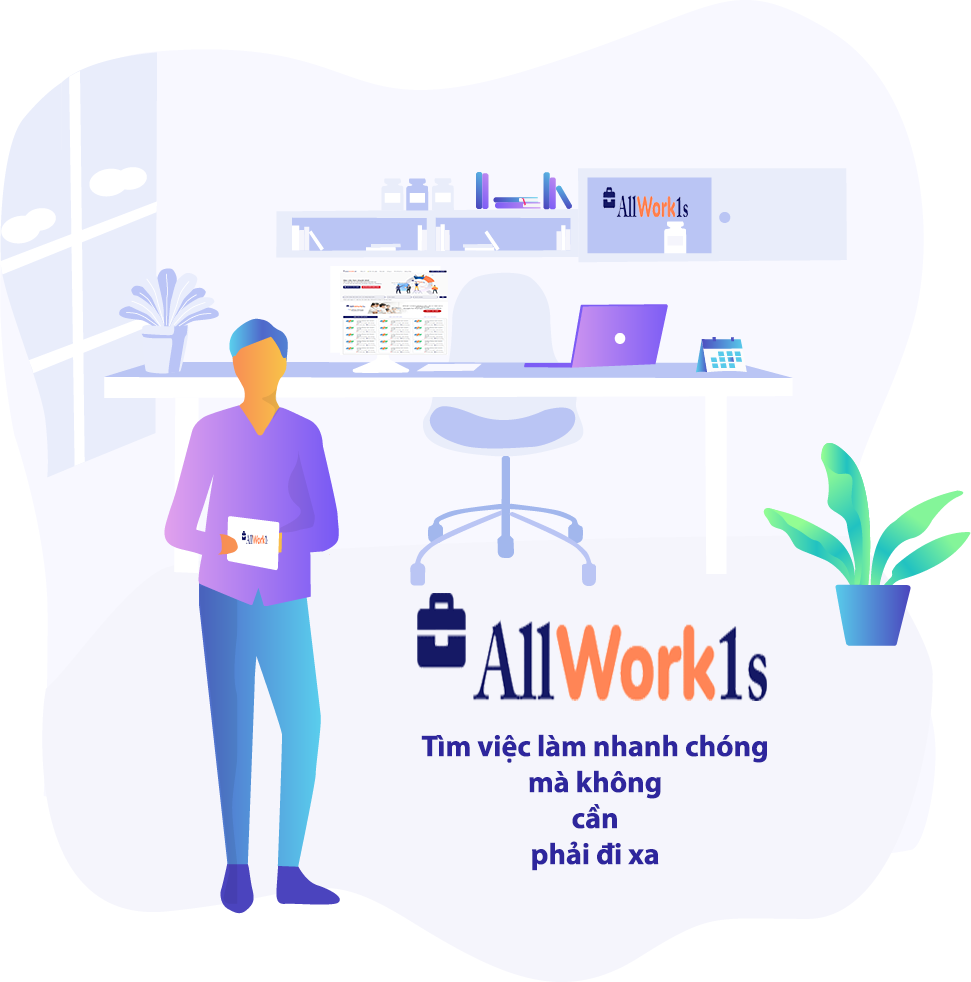
<style>
.page{position:relative;width:971px;height:982px;background:#f8f8ff}
.page>*{position:absolute;margin:0}
.t1{font:30px "MyriadPro-Bold";color:#2e269d}
</style>
<div class="page">
<p class="t1" style="left:421px;top:734px;width:346px;height:137px;text-align:center">Tìm việc làm nhanh chóng<br>mà không<br>cần<br>phải đi xa</p>
</div>
